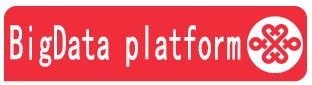
<style>
.page{position:relative;width:312px;height:85px;background:#f02d3b}
.page>*{position:absolute;margin:0}
.t1{font:50px "SimHei";color:#ffffff;font-weight:bold;scale:0.55 1}
</style>
<div class="page">
<p class="t1" style="left:10px;top:25px;width:231px;height:42px">BigData platform</p>
</div>
